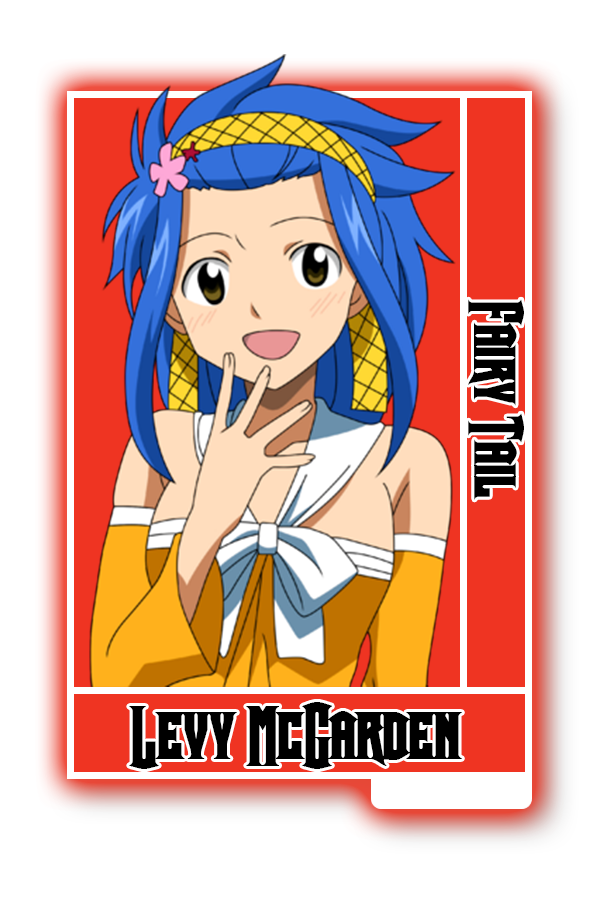
<style>
.page{position:relative;width:600px;height:900px;background:#ffffff}
.page>*{position:absolute;margin:0}
.t1{font:61.5px "Crown-Title";color:#000000}
.t2{font:70.1px "Crown-Title";color:#000000}
</style>
<div class="page">
<p class="t1" style="left:468px;top:299px;width:56px;height:201px;rotate:90deg">Fairy Tail</p>
<p class="t2" style="left:129px;top:702px;width:333px;height:67px">Levy McGarden</p>
</div>
